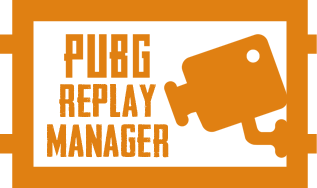
<style>
.page{position:relative;width:317px;height:188px;background:#e08012}
.page>*{position:absolute;margin:0}
.t1{font:44px/40px "HeadlinerNo.45";letter-spacing:0.02em;color:#e08012;scale:1.09 1}
</style>
<div class="page">
<p class="t1" style="left:47px;top:84px;width:122px;height:74px;text-align:center">Replay<br>Manager</p>
</div>
